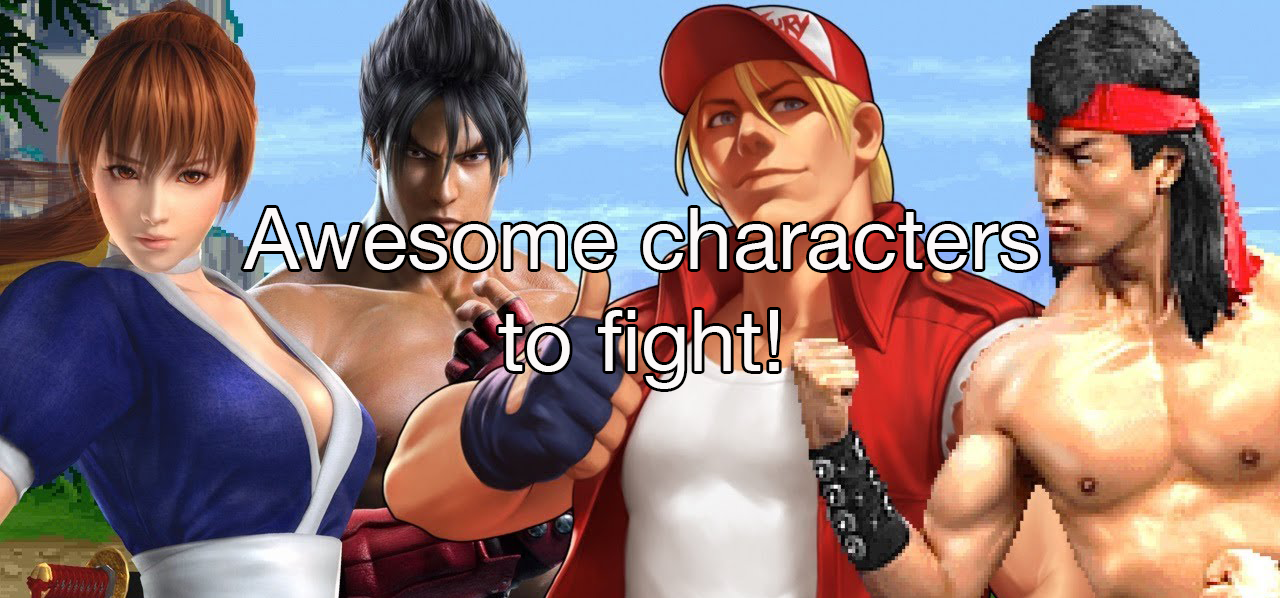
<style>
.page{position:relative;width:1280px;height:598px}
.page>*{position:absolute;margin:0}
.t1{font:84.9px "HelveticaNeue";color:#fbf8f8}
</style>
<div class="page">
<p class="t1" style="left:243px;top:208px;width:795px;height:181px;text-align:center">Awesome characters<br>to fight!</p>
</div>
